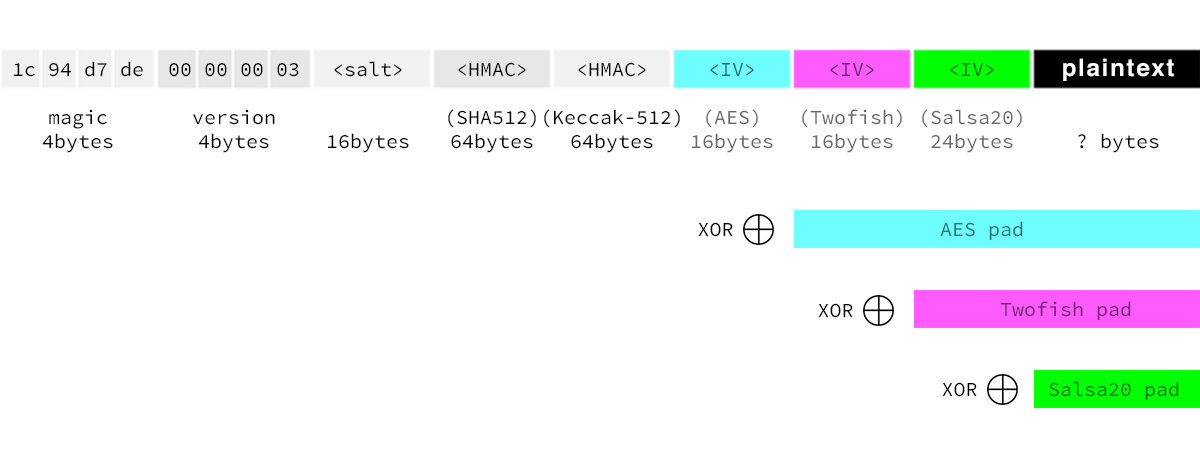
<style>
.page{position:relative;width:1200px;height:466px;background:#ffffff}
.page>*{position:absolute;margin:0}
.t1{font:20px "SourceCodePro-Regular";color:#000000}
.t2{font:20px "SourceCodePro-Regular";color:#676767}
.t3{font:20px "SourceCodePro-Regular";color:#696969}
.t4{font:20px "SourceCodePro-Regular";color:#2e7373}
.t5{font:20px "SourceCodePro-Regular";color:#732573}
.t6{font:20px "SourceCodePro-Regular";color:#007300}
</style>
<div class="page">
<p class="t1" style="left:14px;top:61px;width:129px;height:92px;text-align:center">1c 94 d7 de<br><br>magic<br>4bytes</p>
<p class="t1" style="left:169px;top:63px;width:130px;height:90px;text-align:center">00 00 00 03<br><br>version<br>4bytes</p>
<p class="t1" style="left:328px;top:61px;width:81px;height:92px;text-align:center">&lt;salt&gt;<br><br><br>16bytes</p>
<p class="t1" style="left:448px;top:62px;width:88px;height:91px;text-align:center">&lt;HMAC&gt;<br><br>(SHA512)<br>64bytes</p>
<p class="t1" style="left:544px;top:62px;width:136px;height:91px;text-align:center">&lt;HMAC&gt;<br><br>(Keccak-512)<br>64bytes</p>
<p class="t2" style="left:692px;top:63px;width:81px;height:90px;text-align:center">&lt;IV&gt;<br><br>(AES)<br>16bytes</p>
<p class="t3" style="left:802px;top:63px;width:100px;height:90px;text-align:center">&lt;IV&gt;<br><br>(Twofish)<br>16bytes</p>
<p class="t3" style="left:922px;top:63px;width:100px;height:90px;text-align:center">&lt;IV&gt;<br><br>(Salsa20)<br>24bytes</p>
<p class="t1" style="left:698px;top:222px;width:35px;height:15px">XOR</p>
<p class="t4" style="left:940px;top:221px;width:83px;height:19px">AES pad</p>
<p class="t1" style="left:818px;top:303px;width:35px;height:15px">XOR</p>
<p class="t5" style="left:1000px;top:301px;width:131px;height:19px">Twofish pad</p>
<p class="t1" style="left:942px;top:382px;width:35px;height:15px">XOR</p>
<p class="t6" style="left:1049px;top:381px;width:130px;height:19px">Salsa20 pad</p>
</div>
